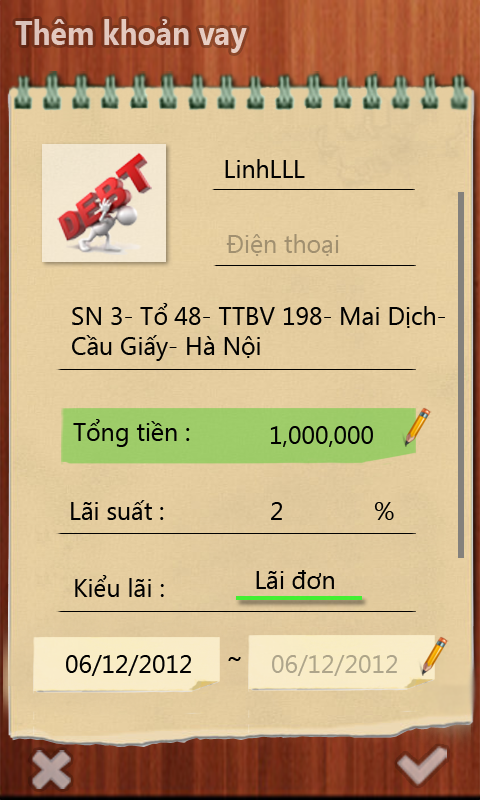
<style>
.page{position:relative;width:480px;height:800px}
.page>*{position:absolute;margin:0}
.t1{font:34px "SegoeUI-Bold";color:#e3c8bf;scale:0.88 1}
.t2{font:25px "SegoeUI";color:#000000}
.t3{font:25px "SegoeUI";color:#a19070}
.t4{font:25px "SegoeUI";color:#aea58b}
</style>
<div class="page">
<p class="t1" style="left:15px;top:19px;width:232px;height:34px">Thêm khoản vay</p>
<p class="t2" style="left:225px;top:159px;width:80px;height:19px">LinhLLL</p>
<p class="t3" style="left:226px;top:234px;width:113px;height:22px">Điện thoại</p>
<p class="t2" style="left:72px;top:303px;width:373px;height:58px">SN 3- Tổ 48- TTBV 198- Mai Dịch- Cầu Giấy- Hà Nội</p>
<p class="t2" style="left:73px;top:419px;width:117px;height:28px">Tổng tiền :</p>
<p class="t2" style="left:270px;top:426px;width:103px;height:21px">1,000,000</p>
<p class="t2" style="left:71px;top:500px;width:93px;height:20px">Lãi suất :</p>
<p class="t2" style="left:271px;top:502px;width:11px;height:18px">2</p>
<p class="t2" style="left:374px;top:502px;width:20px;height:18px">%</p>
<p class="t2" style="left:75px;top:575px;width:89px;height:22px">Kiểu lãi :</p>
<p class="t2" style="left:256px;top:570px;width:78px;height:19px">Lãi đơn</p>
<p class="t2" style="left:66px;top:655px;width:125px;height:21px">06/12/2012</p>
<p class="t2" style="left:228px;top:657px;width:13px;height:4px">~</p>
<p class="t4" style="left:272px;top:655px;width:125px;height:21px">06/12/2012</p>
</div>
